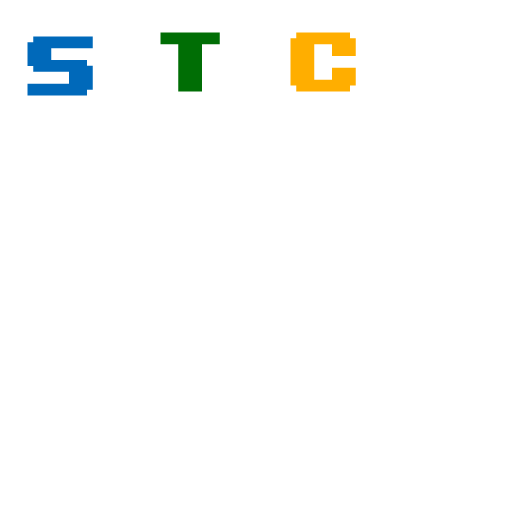
<style>
.page{position:relative;width:512px;height:512px;background:#ffffff}
.page>*{position:absolute;margin:0}
.t1{font:118.1px "UpheavalPro-Regular";letter-spacing:0.006em;color:#0069ba}
.t2{font:118.1px "UpheavalPro-Regular";letter-spacing:0.006em;color:#006e05}
.t3{font:118.1px "UpheavalPro-Regular";letter-spacing:0.006em;color:#ffae00}
</style>
<div class="page">
<p class="t1" style="left:27px;top:36px;width:66px;height:60px">S</p>
<p class="t2" style="left:160px;top:32px;width:60px;height:60px">T</p>
<p class="t3" style="left:290px;top:32px;width:66px;height:60px">C</p>
</div>
